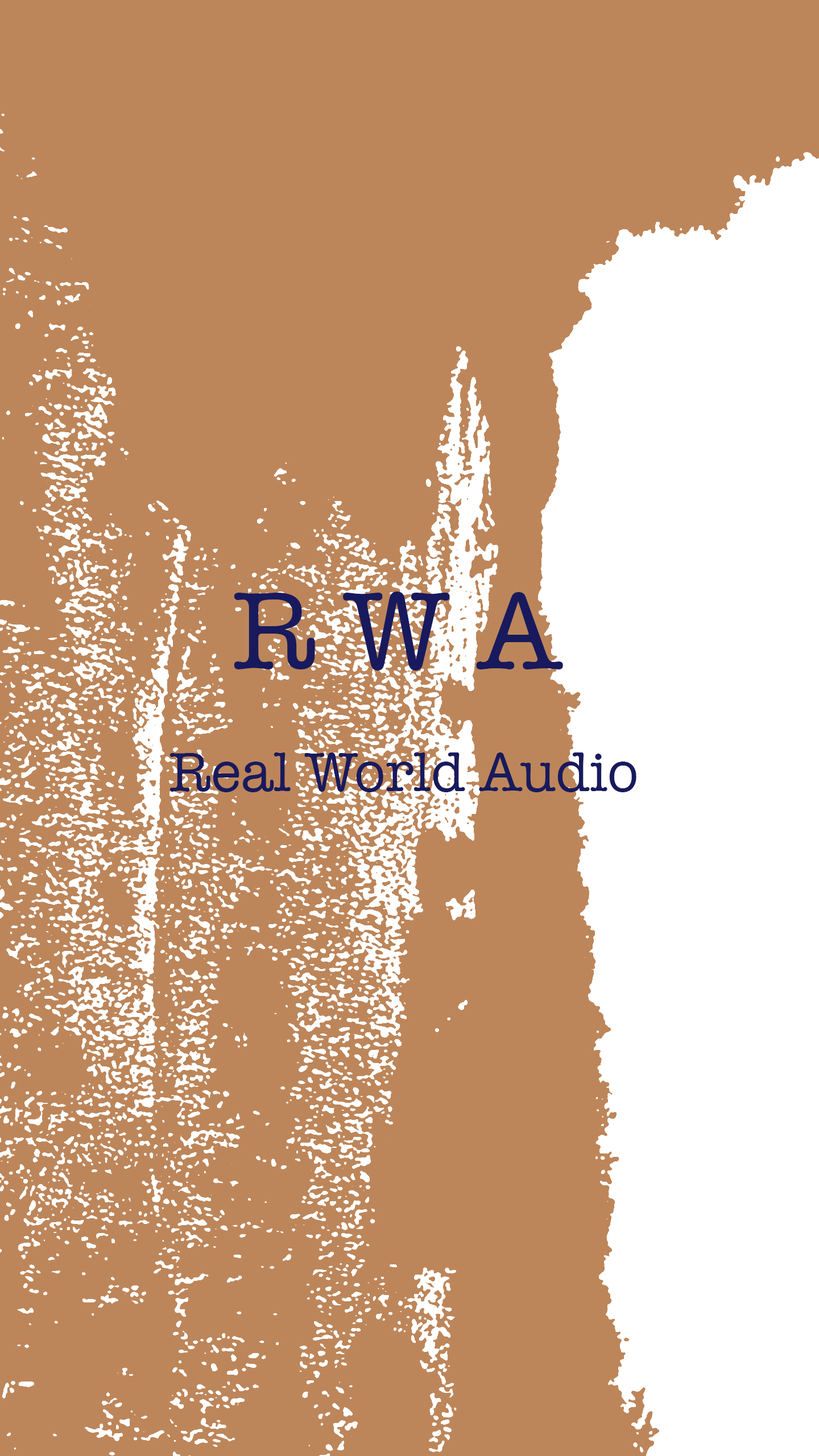
<style>
.page{position:relative;width:819px;height:1456px;background:#bd865a}
.page>*{position:absolute;margin:0}
.t1{font:113.7px "AmericanTypewriter";color:#181a5d}
.t2{font:56.9px "AmericanTypewriter";color:#181a5d}
</style>
<div class="page">
<p class="t1" style="left:234px;top:591px;width:329px;height:80px">R W A</p>
<p class="t2" style="left:169px;top:752px;width:467px;height:40px">Real World Audio</p>
</div>
